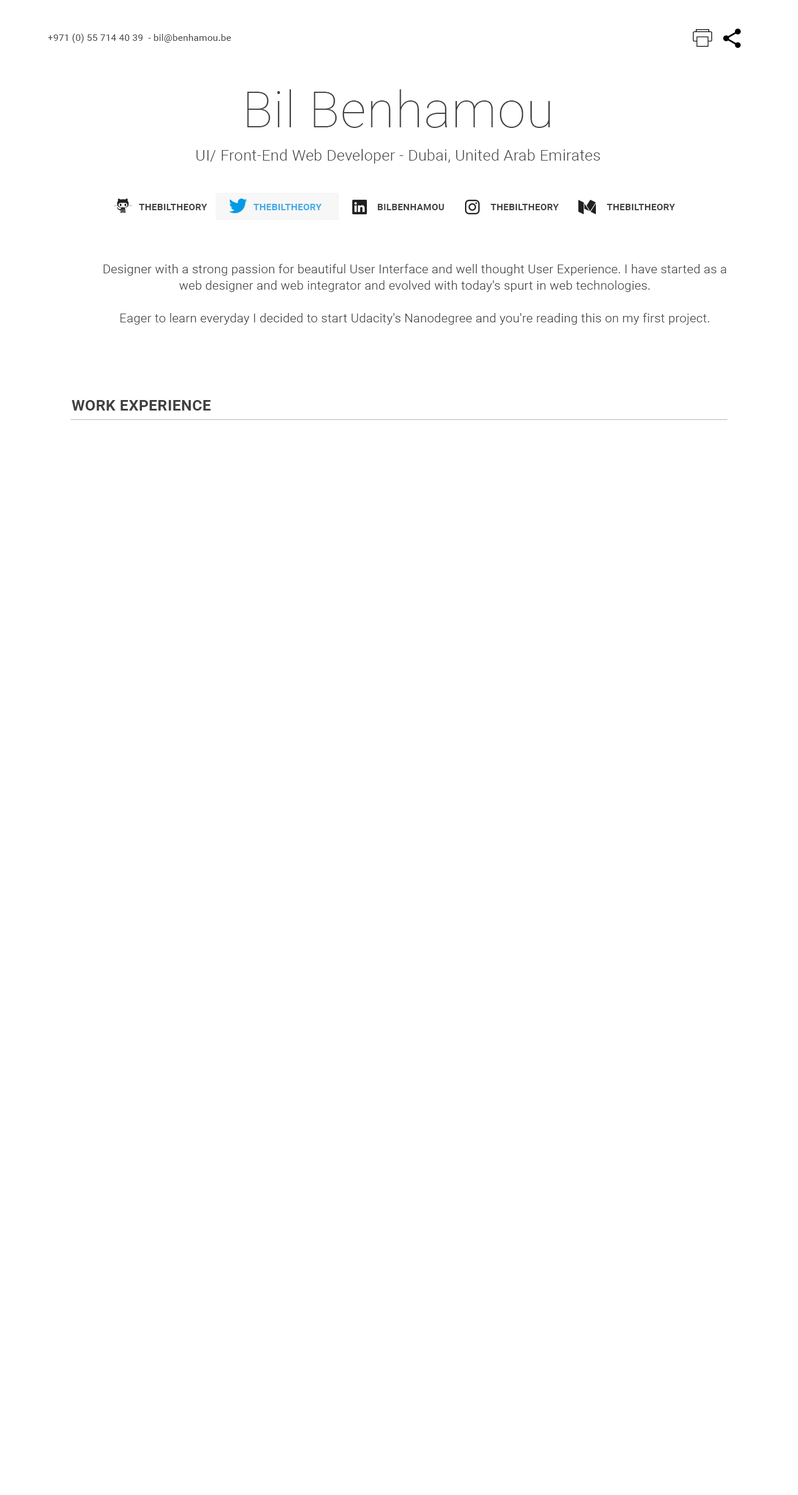
<style>
.page{position:relative;width:798px;height:1495px;background:#ffffff}
.page>*{position:absolute;margin:0}
.t1{font:9.3px "Roboto-Regular";letter-spacing:0.02em;color:#404040}
.t2{font:50.2px "Roboto-Thin";letter-spacing:0.02em;color:#404040}
.t3{font:15.2px "Roboto-Light";letter-spacing:0.02em;color:#404040}
.t4{font:9.3px "Roboto-Bold";letter-spacing:0.02em;color:#404040;text-transform:uppercase}
.t5{font:9.3px "Roboto-Bold";letter-spacing:0.02em;color:#40a9e7;text-transform:uppercase}
.t6{font:12.3px/16.4px "Roboto-Light";letter-spacing:0.02em;color:#404040}
.t7{font:15.2px "Roboto-Bold";letter-spacing:0.02em;color:#404040}
</style>
<div class="page">
<p class="t1" style="left:48px;top:33px;width:183px;height:10px">+971 (0) 55 714 40 39  - bil@benhamou.be</p>
<p class="t2" style="left:247px;top:89px;width:303px;height:39px">Bil Benhamou</p>
<p class="t3" style="left:196px;top:149px;width:404px;height:15px">UI/ Front-End Web Developer - Dubai, United Arab Emirates</p>
<p class="t4" style="left:139px;top:204px;width:68px;height:6px">TheBilTheory</p>
<p class="t5" style="left:253px;top:204px;width:69px;height:6px">TheBilTheory</p>
<p class="t4" style="left:377px;top:204px;width:67px;height:6px">bilbenhamou</p>
<p class="t4" style="left:491px;top:204px;width:68px;height:6px">TheBilTheory</p>
<p class="t4" style="left:607px;top:204px;width:68px;height:6px">TheBilTheory</p>
<p class="t6" style="left:103px;top:264px;width:623px;height:61px;text-align:center">Designer with a strong passion for beautiful User Interface and well thought User Experience. I have started as a web designer and web integrator and evolved with today's spurt in web technologies. <br><br>Eager to learn everyday I decided to start Udacity's Nanodegree and you're reading this on my first project.</p>
<p class="t7" style="left:71px;top:400px;width:140px;height:11px">WORK EXPERIENCE</p>
</div>
